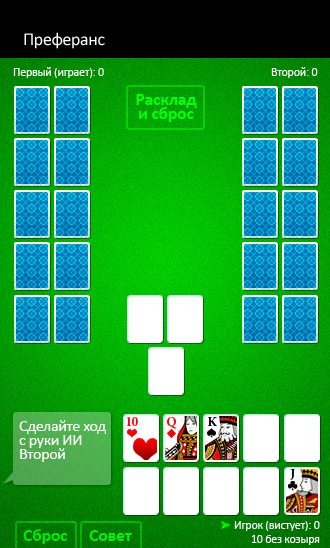
<style>
.page{position:relative;width:330px;height:548px}
.page>*{position:absolute;margin:0}
.t1{font:18px "Calibri";letter-spacing:-0.02em;color:#ffffff}
.t2{font:12px "Calibri";letter-spacing:-0.02em;color:#ffffff}
.t3{font:18px/14px "Calibri-Bold";letter-spacing:-0.02em;color:#00ff00}
.t4{font:16px/14px "Calibri";letter-spacing:-0.02em;color:#ffffff}
.t5{font:13.4px "MinionPro-Bold";letter-spacing:-0.02em;color:#ff0000}
.t6{font:13.4px "MinionPro-Bold";letter-spacing:-0.02em;color:#010000}
.t7{font:18px "Calibri-Bold";letter-spacing:-0.02em;color:#00e600}
.t8{font:18px "Calibri-Bold";letter-spacing:-0.02em;color:#00ef00}
</style>
<div class="page">
<p class="t1" style="left:24px;top:32px;width:81px;height:17px">Преферанс</p>
<p class="t2" style="left:13px;top:67px;width:91px;height:11px">Первый (играет): 0</p>
<p class="t2" style="left:271px;top:67px;width:47px;height:11px">Второй: 0</p>
<p class="t3" style="left:136px;top:94px;width:61px;height:28px;text-align:center">Расклад<br>и сброс</p>
<p class="t4" style="left:19px;top:420px;width:87px;height:42px">Сделайте ход<br>с руки ИИ<br>Второй</p>
<p class="t5" style="left:126px;top:417px;width:12px;height:9px">10</p>
<p class="t5" style="left:167px;top:417px;width:10px;height:12px">Q</p>
<p class="t6" style="left:208px;top:417px;width:9px;height:9px">K</p>
<p class="t6" style="left:290px;top:469px;width:5px;height:11px">J</p>
<p class="t2" style="left:234px;top:521px;width:86px;height:10px">Игрок (вистует): 0</p>
<p class="t7" style="left:23px;top:529px;width:44px;height:15px">Сброс</p>
<p class="t8" style="left:89px;top:530px;width:43px;height:11px">Совет</p>
<p class="t2" style="left:251px;top:535px;width:69px;height:10px">10 без козыря</p>
</div>
